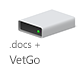
<style>
.page{position:relative;width:80px;height:80px;background:#ffffff}
.page>*{position:absolute;margin:0}
.t1{font:10.3px "SegoeUI";scale:0.95 1}
.t2{font:12px "SegoeUI";color:#424242;scale:0.95 1}
</style>
<div class="page">
<p class="t1" style="left:9px;top:40px;width:31px;height:8px">.docs +</p>
<p class="t2" style="left:9px;top:55px;width:31px;height:9px">VetGo</p>
</div>
